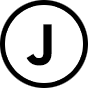
<style>
.page{position:relative;width:88px;height:88px;background:#ffffff}
.page>*{position:absolute;margin:0}
.t1{font:60px "NeutraText-Bold";color:#000000}
</style>
<div class="page">
<p class="t1" style="left:26px;top:24px;width:26px;height:42px">J</p>
</div>
